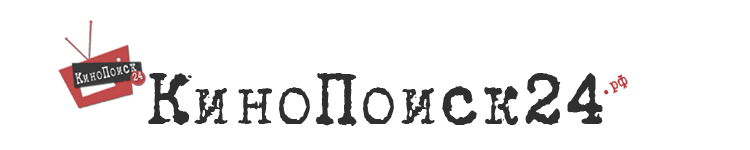
<style>
.page{position:relative;width:750px;height:150px;background:#ffffff}
.page>*{position:absolute;margin:0}
.t1{font:84.5px "B52";color:#2f2f2f;scale:0.92 1}
.t2{font:18.2px "B52";color:#ba3636;scale:0.92 1}
</style>
<div class="page">
<p class="t1" style="left:148px;top:73px;width:455px;height:53px">КиноПоиск24</p>
<p class="t2" style="left:604px;top:74px;width:24px;height:21px;rotate:-26deg">.рф</p>
</div>
